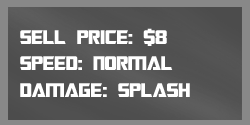
<style>
.page{position:relative;width:250px;height:125px}
.page>*{position:absolute;margin:0}
.t1{font:22px "TransformersMovie";color:#ffffff}
.t2{font:22px "TransformersMovie";letter-spacing:0.02em;color:#ffffff}
</style>
<div class="page">
<p class="t1" style="left:20px;top:28px;width:170px;height:69px">sell p<span class="t2">ri</span>ce: $8<br>spee<span class="t2">d</span>: normal<br>dama<span class="t2">ge</span>: splash</p>
</div>
